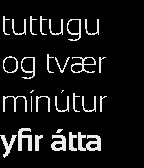
<style>
.page{position:relative;width:144px;height:168px;background:#000000}
.page>*{position:absolute;margin:0}
.t1{font:32px "Sansation-Light";letter-spacing:-0.025em;color:#ebebeb}
.t2{font:32px "Sansation-Bold";letter-spacing:-0.025em;color:#ebebeb}
</style>
<div class="page">
<p class="t1" style="left:3px;top:16px;width:104px;height:96px">tuttugu<br>og tvær<br>mínútur</p>
<p class="t2" style="left:0px;top:128px;width:101px;height:30px">yfir átta</p>
</div>
